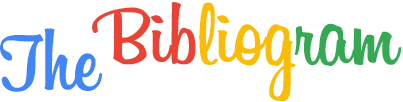
<style>
.page{position:relative;width:403px;height:102px;background:#ffffff}
.page>*{position:absolute;margin:0}
.t1{font:90px "Billabong";color:#fbbc05}
.t2{font:90px "Billabong";color:#ea4335}
.t3{font:90px "Billabong";color:#34a853}
.t4{font:90px "Billabong";color:#4285f4}
</style>
<div class="page">
<p class="t1" style="left:92px;top:2px;width:310px;height:99px"><span class="t2">Bib</span>liog<span class="t3">ram</span></p>
<p class="t4" style="left:0px;top:28px;width:102px;height:64px">The</p>
</div>
